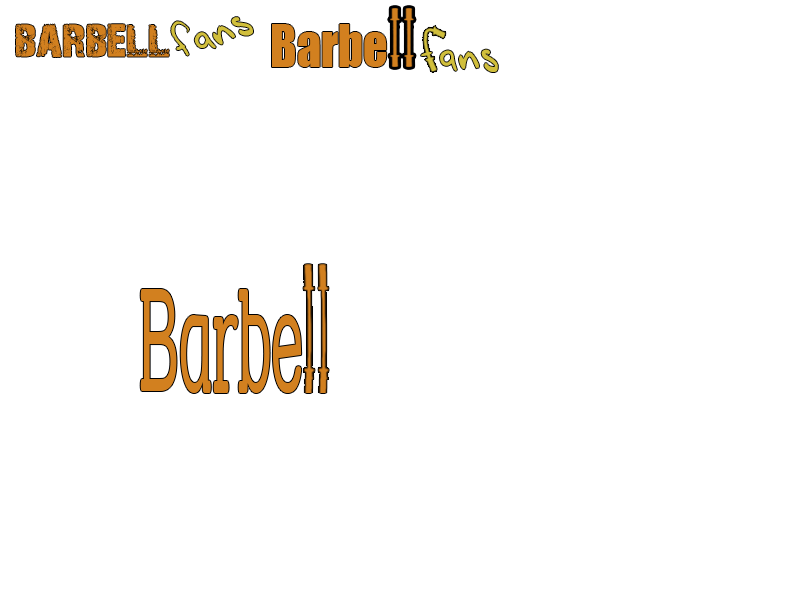
<style>
.page{position:relative;width:800px;height:600px;background:#ffffff}
.page>*{position:absolute;margin:0}
.t1{font:36px "AhnbergHand";color:#d1bf3c}
.t2{font:48px "28-Days-Later-Regular";color:#d2801f}
.t3{font:54.3px "Impact";color:#d2801f;scale:0.88 1}
.t4{font:142.4px "StreetCornerSlabNarrower";color:#d2801f}
</style>
<div class="page">
<p class="t1" style="left:171px;top:17px;width:82px;height:39px;rotate:-19deg">fans</p>
<p class="t2" style="left:16px;top:24px;width:153px;height:33px">barbell</p>
<p class="t3" style="left:272px;top:24px;width:115px;height:43px">Barbe</p>
<p class="t1" style="left:440px;top:49px;width:58px;height:23px;rotate:5deg">ans</p>
<p class="t4" style="left:140px;top:289px;width:162px;height:104px">Barbe</p>
</div>
